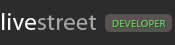
<style>
.page{position:relative;width:175px;height:45px;background:#2c2c2c}
.page>*{position:absolute;margin:0}
.t1{font:24px "MyriadPro-Regular";letter-spacing:0.02em;color:#a8a7a7}
.t2{font:24px "MyriadPro-Regular";letter-spacing:0.02em;color:#fffefe}
.t3{font:10px "SegoeUI";letter-spacing:0.02em;color:#65cb5b}
</style>
<div class="page">
<p class="t1" style="left:2px;top:13px;width:94px;height:17px"><span class="t2">live</span>street</p>
<p class="t3" style="left:112px;top:20px;width:54px;height:7px">DEVELOPER</p>
</div>
